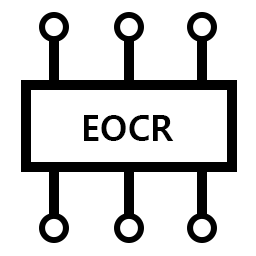
<style>
.page{position:relative;width:256px;height:256px;background:#ffffff}
.page>*{position:absolute;margin:0}
.t1{font:35.4px "MalgunGothicBold";color:#000000}
</style>
<div class="page">
<p class="t1" style="left:84px;top:115px;width:90px;height:26px">EOCR</p>
</div>
